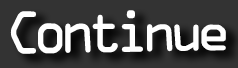
<style>
.page{position:relative;width:238px;height:68px;background:#333333}
.page>*{position:absolute;margin:0}
.t1{font:60px "OCRAExtended";letter-spacing:-0.15em;color:#ffffff}
</style>
<div class="page">
<p class="t1" style="left:10px;top:10px;width:216px;height:44px">Continue</p>
</div>
